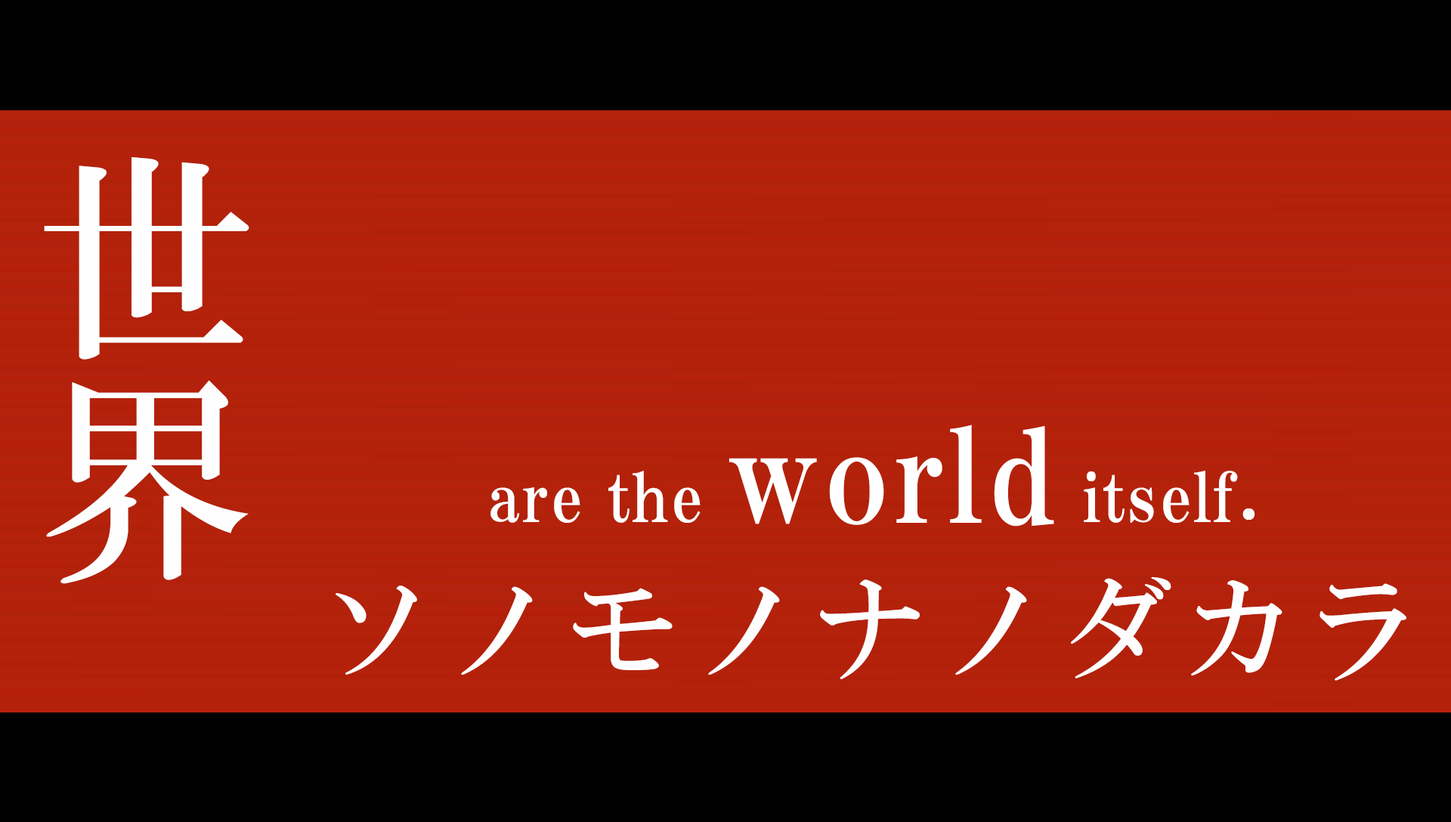
<style>
.page{position:relative;width:1451px;height:822px;background:#000000}
.page>*{position:absolute;margin:0}
.t1{font:222.9px/24.9px "HGMinchoB";letter-spacing:-0.02em;color:#fefefe}
.t2{font:67.2px "HGPMinchoE";letter-spacing:0.025em;color:#ffffff}
.t3{font:128.1px "HGPMinchoE";letter-spacing:0.025em;color:#ffffff}
.t4{font:113.3px "HGMinchoB";letter-spacing:0.09em;color:#fefefe}
</style>
<div class="page">
<p class="t1" style="left:44px;top:157px;width:205px;height:427px">世界</p>
<p class="t2" style="left:490px;top:425px;width:765px;height:102px">are the <span class="t3">world</span> itself.</p>
<p class="t4" style="left:335px;top:576px;width:1071px;height:105px">ソノモノナノダカラ</p>
</div>
